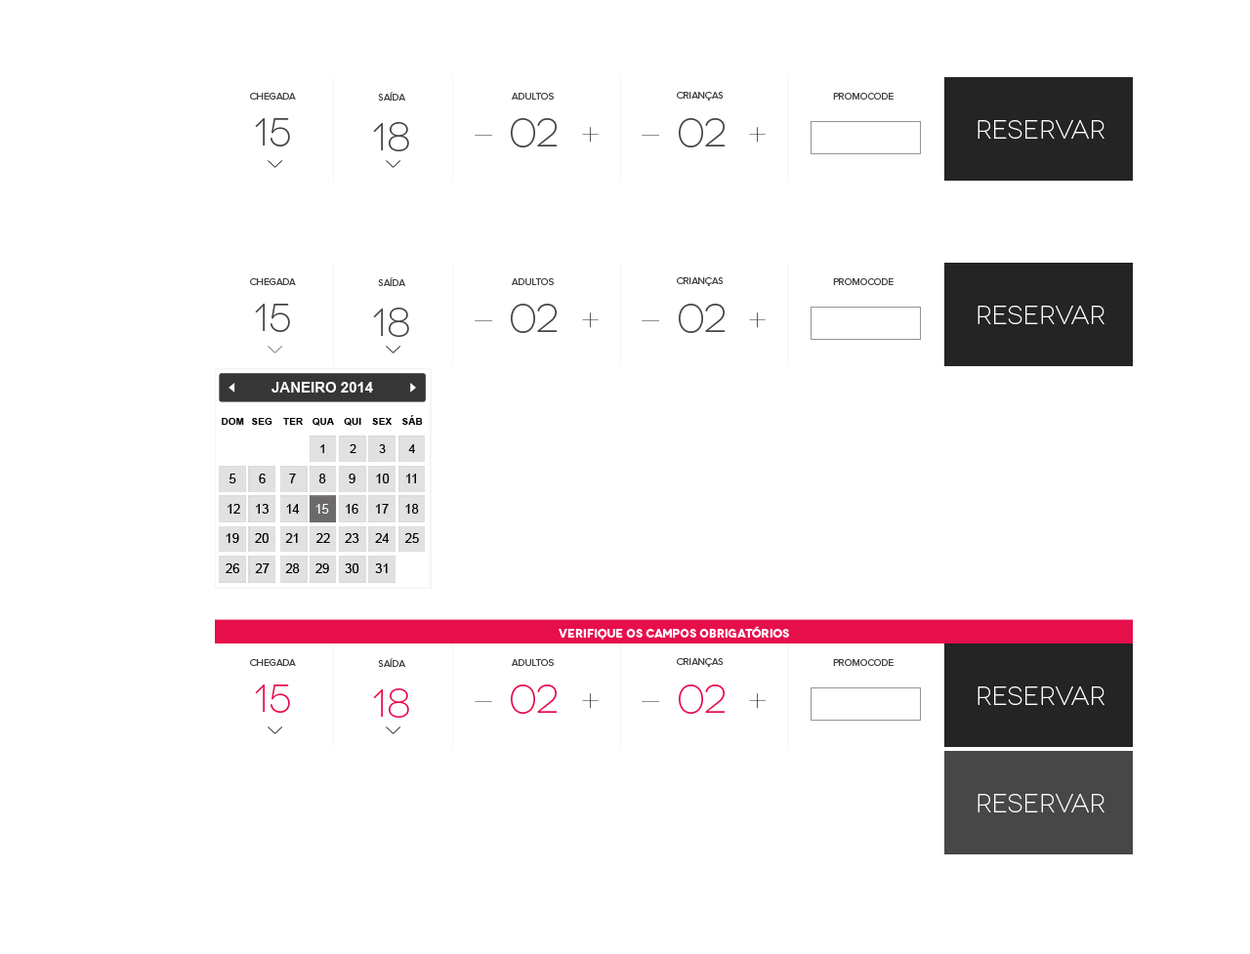
<style>
.page{position:relative;width:1250px;height:954px;background:#ffffff}
.page>*{position:absolute;margin:0}
.t1{font:9.8px "ProximaNova-Regular";color:#434343}
.t2{font:39.1px "Novecentowide-Light";color:#434343}
.t3{font:26.4px "Novecentowide-Light";color:#ffffff}
.t4{font:14.6px "Arial-BoldMT";color:#ffffff}
.t5{font:9.8px "Arial-BoldMT";color:#000000}
.t6{font:12px "ArialMT";color:#000000}
.t7{font:12.7px "ArialMT";color:#000000}
.t8{font:12.7px "ArialMT";color:#ffffff}
.t9{font:11.7px "Novecentowide-Bold";color:#ffffff}
.t10{font:39.1px "Novecentowide-Light";color:#e60e4b}
</style>
<div class="page">
<p class="t1" style="left:250px;top:93px;width:46px;height:7px">CHEGADA</p>
<p class="t1" style="left:378px;top:92px;width:27px;height:9px">SAÍDA</p>
<p class="t1" style="left:512px;top:93px;width:42px;height:7px">ADULTOS</p>
<p class="t1" style="left:677px;top:92px;width:47px;height:9px">CRIANÇAS</p>
<p class="t1" style="left:833px;top:93px;width:60px;height:7px">PROMOCODE</p>
<p class="t2" style="left:255px;top:118px;width:35px;height:28px">15</p>
<p class="t2" style="left:373px;top:122px;width:36px;height:29px">18</p>
<p class="t2" style="left:511px;top:118px;width:46px;height:29px">02</p>
<p class="t2" style="left:679px;top:118px;width:46px;height:29px">02</p>
<p class="t3" style="left:977px;top:120px;width:127px;height:19px">Reservar</p>
<p class="t1" style="left:250px;top:278px;width:46px;height:7px">CHEGADA</p>
<p class="t1" style="left:378px;top:277px;width:27px;height:9px">SAÍDA</p>
<p class="t1" style="left:512px;top:278px;width:42px;height:7px">ADULTOS</p>
<p class="t1" style="left:677px;top:277px;width:47px;height:9px">CRIANÇAS</p>
<p class="t1" style="left:833px;top:278px;width:60px;height:7px">PROMOCODE</p>
<p class="t2" style="left:255px;top:304px;width:35px;height:28px">15</p>
<p class="t2" style="left:511px;top:304px;width:46px;height:29px">02</p>
<p class="t2" style="left:679px;top:304px;width:46px;height:29px">02</p>
<p class="t3" style="left:977px;top:306px;width:127px;height:18px">Reservar</p>
<p class="t2" style="left:373px;top:308px;width:36px;height:29px">18</p>
<p class="t4" style="left:271px;top:382px;width:102px;height:11px">JANEIRO 2014</p>
<p class="t5" style="left:222px;top:418px;width:22px;height:7px">DOM</p>
<p class="t5" style="left:252px;top:418px;width:20px;height:7px">SEG</p>
<p class="t5" style="left:283px;top:418px;width:20px;height:7px">TER</p>
<p class="t5" style="left:312px;top:418px;width:22px;height:8px">QUA</p>
<p class="t5" style="left:344px;top:418px;width:17px;height:8px">QUI</p>
<p class="t5" style="left:372px;top:418px;width:20px;height:7px">SEX</p>
<p class="t5" style="left:402px;top:415px;width:21px;height:10px">SÁB</p>
<p class="t6" style="left:320px;top:444px;width:4px;height:9px">1</p>
<p class="t6" style="left:350px;top:444px;width:6px;height:9px">2</p>
<p class="t6" style="left:379px;top:444px;width:7px;height:9px">3</p>
<p class="t6" style="left:408px;top:444px;width:7px;height:9px">4</p>
<p class="t7" style="left:229px;top:474px;width:7px;height:9px">5</p>
<p class="t7" style="left:259px;top:474px;width:7px;height:9px">6</p>
<p class="t7" style="left:289px;top:474px;width:7px;height:9px">7</p>
<p class="t7" style="left:319px;top:474px;width:7px;height:9px">8</p>
<p class="t7" style="left:349px;top:474px;width:6px;height:9px">9</p>
<p class="t7" style="left:376px;top:474px;width:14px;height:9px">10</p>
<p class="t7" style="left:406px;top:474px;width:10px;height:9px">11</p>
<p class="t7" style="left:228px;top:504px;width:12px;height:10px">12</p>
<p class="t7" style="left:256px;top:504px;width:13px;height:10px">13</p>
<p class="t7" style="left:286px;top:504px;width:14px;height:10px">14</p>
<p class="t8" style="left:315px;top:504px;width:14px;height:10px">15</p>
<p class="t7" style="left:346px;top:504px;width:12px;height:10px">16</p>
<p class="t7" style="left:376px;top:504px;width:13px;height:10px">17</p>
<p class="t7" style="left:405px;top:504px;width:14px;height:10px">18</p>
<p class="t7" style="left:226px;top:533px;width:13px;height:10px">19</p>
<p class="t7" style="left:255px;top:533px;width:14px;height:10px">20</p>
<p class="t7" style="left:285px;top:533px;width:13px;height:10px">21</p>
<p class="t7" style="left:316px;top:533px;width:14px;height:10px">22</p>
<p class="t7" style="left:345px;top:533px;width:14px;height:10px">23</p>
<p class="t7" style="left:375px;top:533px;width:15px;height:10px">24</p>
<p class="t7" style="left:405px;top:533px;width:14px;height:10px">25</p>
<p class="t7" style="left:226px;top:563px;width:13px;height:10px">26</p>
<p class="t7" style="left:255px;top:563px;width:15px;height:10px">27</p>
<p class="t7" style="left:285px;top:563px;width:15px;height:10px">28</p>
<p class="t7" style="left:315px;top:563px;width:14px;height:10px">29</p>
<p class="t7" style="left:345px;top:563px;width:14px;height:10px">30</p>
<p class="t7" style="left:375px;top:563px;width:13px;height:10px">31</p>
<p class="t9" style="left:559px;top:626px;width:230px;height:14px">verifique os campos obrigatórios</p>
<p class="t1" style="left:250px;top:659px;width:46px;height:7px">CHEGADA</p>
<p class="t1" style="left:378px;top:658px;width:27px;height:9px">SAÍDA</p>
<p class="t1" style="left:512px;top:659px;width:42px;height:7px">ADULTOS</p>
<p class="t1" style="left:677px;top:658px;width:47px;height:9px">CRIANÇAS</p>
<p class="t1" style="left:833px;top:659px;width:60px;height:7px">PROMOCODE</p>
<p class="t10" style="left:255px;top:685px;width:35px;height:28px">15</p>
<p class="t10" style="left:373px;top:688px;width:36px;height:30px">18</p>
<p class="t10" style="left:511px;top:685px;width:46px;height:29px">02</p>
<p class="t10" style="left:679px;top:685px;width:46px;height:29px">02</p>
<p class="t3" style="left:977px;top:686px;width:127px;height:19px">Reservar</p>
<p class="t3" style="left:977px;top:794px;width:127px;height:18px">Reservar</p>
</div>
